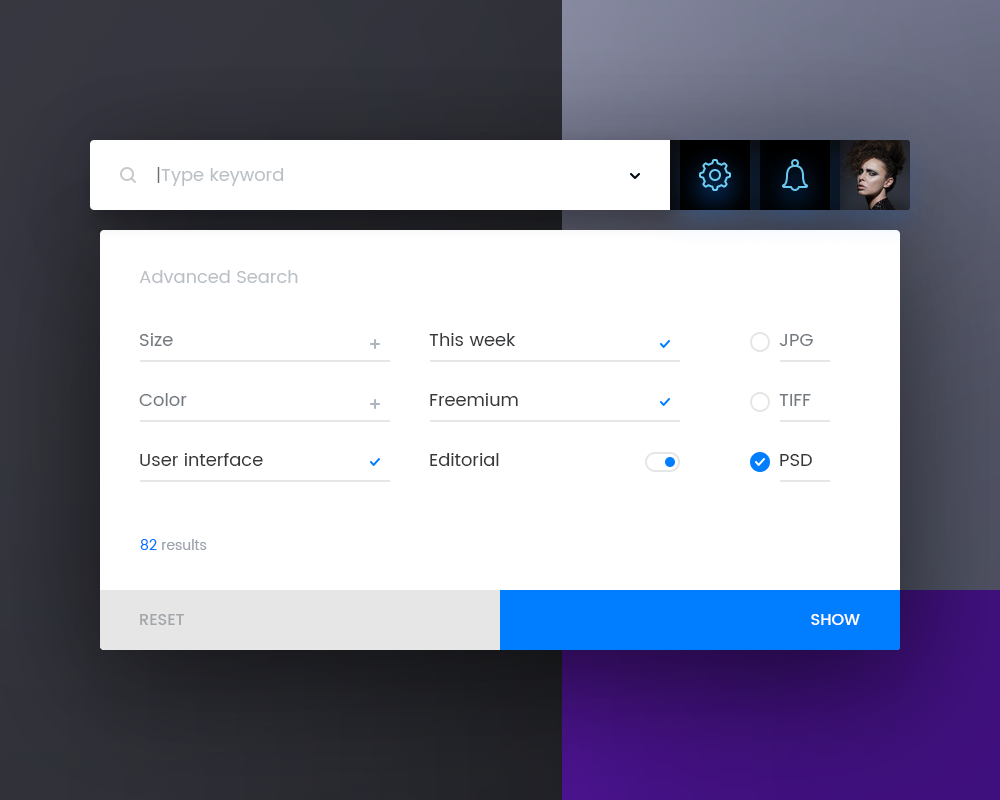
<style>
.page{position:relative;width:1000px;height:800px;background:#ffffff}
.page>*{position:absolute;margin:0}
.t1{font:18px "Poppins-Regular";color:#b9bfc5}
.t2{font:18px "Poppins-Light";color:#6b6d6f}
.t3{font:18px "Poppins-Regular";color:#737980}
.t4{font:18px "Poppins-Regular";color:#36383a}
.t5{font:14px "Poppins-Regular";color:#9aa2ac}
.t6{font:14px "Poppins-Regular";color:#0076ff}
.t7{font:16px "Poppins-Medium";color:#a3a7ac;text-transform:uppercase}
.t8{font:16px "Poppins-Medium";color:#ffffff;text-transform:uppercase}
</style>
<div class="page">
<p class="t1" style="left:157px;top:167px;width:127px;height:19px"><span class="t2">|</span>Type keyword</p>
<p class="t1" style="left:139px;top:270px;width:159px;height:13px">Advanced Search</p>
<p class="t3" style="left:140px;top:333px;width:33px;height:13px">Size</p>
<p class="t4" style="left:429px;top:333px;width:87px;height:13px">This week</p>
<p class="t3" style="left:779px;top:334px;width:34px;height:12px">JPG</p>
<p class="t3" style="left:139px;top:393px;width:48px;height:13px">Color</p>
<p class="t4" style="left:430px;top:393px;width:88px;height:13px">Freemium</p>
<p class="t3" style="left:779px;top:394px;width:32px;height:12px">TIFF</p>
<p class="t4" style="left:140px;top:453px;width:123px;height:13px">User interface</p>
<p class="t4" style="left:430px;top:453px;width:69px;height:13px">Editorial</p>
<p class="t4" style="left:780px;top:454px;width:32px;height:12px">PSD</p>
<p class="t5" style="left:140px;top:539px;width:67px;height:11px"><span class="t6">82 </span>results</p>
<p class="t7" style="left:140px;top:614px;width:44px;height:11px">RESET</p>
<p class="t8" style="left:811px;top:614px;width:49px;height:11px">Show</p>
</div>
